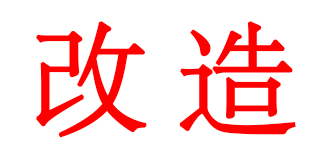
<style>
.page{position:relative;width:320px;height:160px;background:#ffffff}
.page>*{position:absolute;margin:0}
.t1{font:120px "AdobeSongStd-Light";letter-spacing:0.2em;color:#ff0000;font-weight:bold}
</style>
<div class="page">
<p class="t1" style="left:36px;top:21px;width:260px;height:117px">改造</p>
</div>
